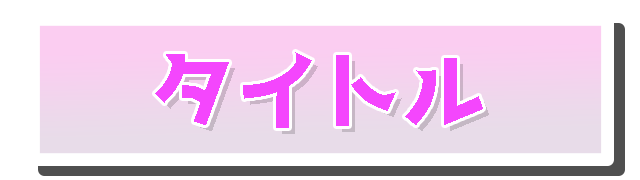
<style>
.page{position:relative;width:640px;height:180px;background:#ffffff}
.page>*{position:absolute;margin:0}
.t1{font:83.3px "07AkazukinPop";color:#f446fd}
</style>
<div class="page">
<p class="t1" style="left:155px;top:52px;width:328px;height:76px">タイトル</p>
</div>
